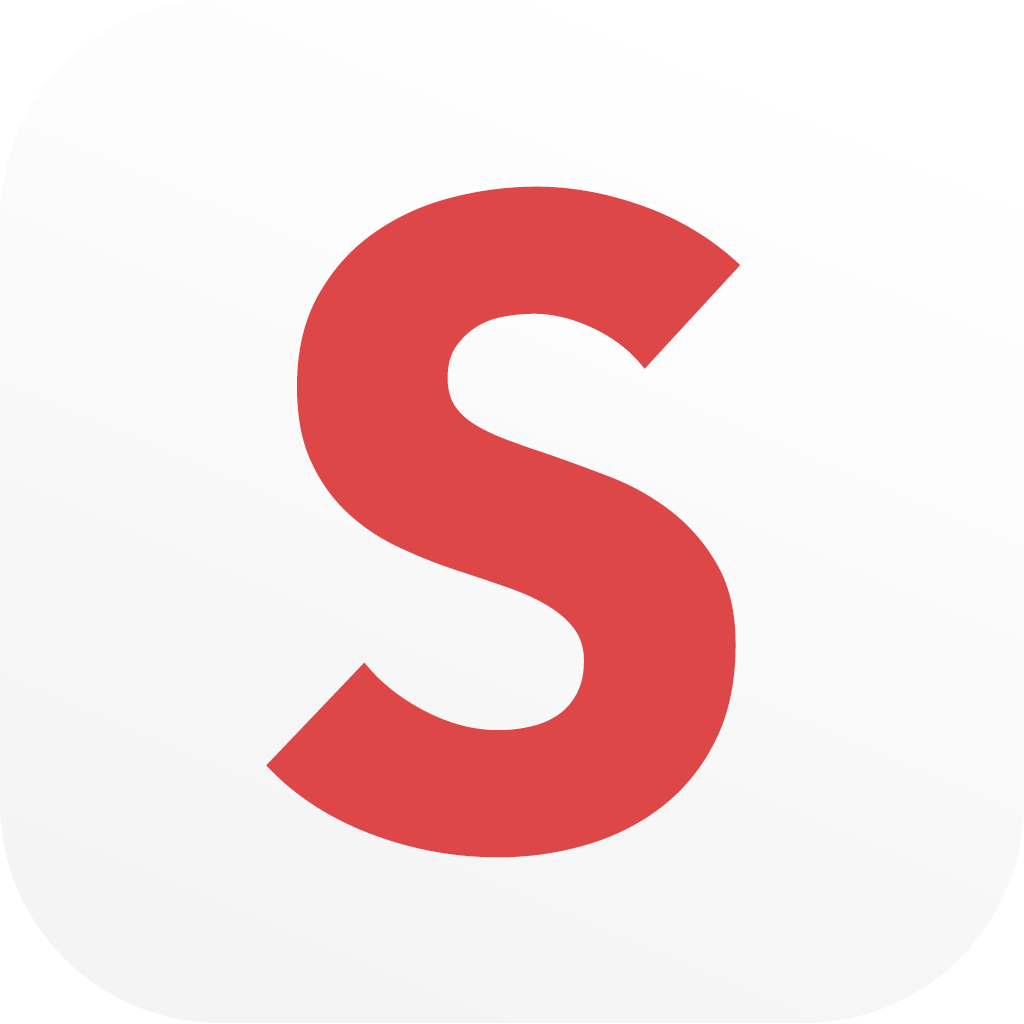
<style>
.page{position:relative;width:1024px;height:1024px}
.page>*{position:absolute;margin:0}
.t1{font:901.3px "AvenirNext-Bold";letter-spacing:-0.075em;color:#de4747}
</style>
<div class="page">
<p class="t1" style="left:266px;top:186px;width:475px;height:672px">S</p>
</div>
